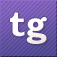
<style>
.page{position:relative;width:57px;height:57px}
.page>*{position:absolute;margin:0}
.t1{font:36px "BookmanOldStyle-Bold";color:#ffffff}
</style>
<div class="page">
<p class="t1" style="left:10px;top:12px;width:37px;height:32px">tg</p>
</div>
